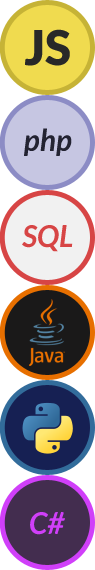
<style>
.page{position:relative;width:95px;height:570px}
.page>*{position:absolute;margin:0}
.t1{font:48px "Lato-Black";color:#282828}
.t2{font:30px "Lato-BoldItalic";color:#232332}
.t3{font:30px "Lato-BoldItalic";color:#d74545}
.t4{font:30px "Lato-BoldItalic";color:#d03ff9}
</style>
<div class="page">
<p class="t1" style="left:25px;top:29px;width:45px;height:37px">JS</p>
<p class="t2" style="left:24px;top:128px;width:48px;height:28px">php</p>
<p class="t3" style="left:22px;top:225px;width:51px;height:27px">SQL</p>
<p class="t4" style="left:30px;top:512px;width:35px;height:23px">C#</p>
</div>
